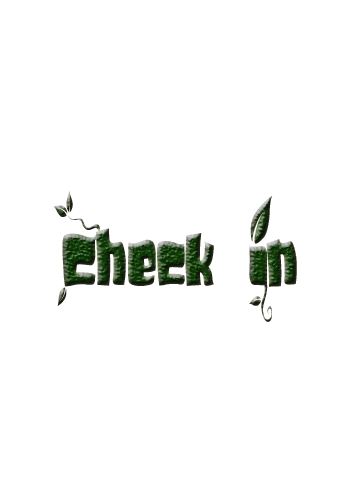
<style>
.page{position:relative;width:360px;height:504px;background:#ffffff}
.page>*{position:absolute;margin:0}
.t1{font:74.5px "SoupLeaf";scale:0.6 1}
</style>
<div class="page">
<p class="t1" style="left:53px;top:191px;width:244px;height:131px">Check In</p>
</div>
